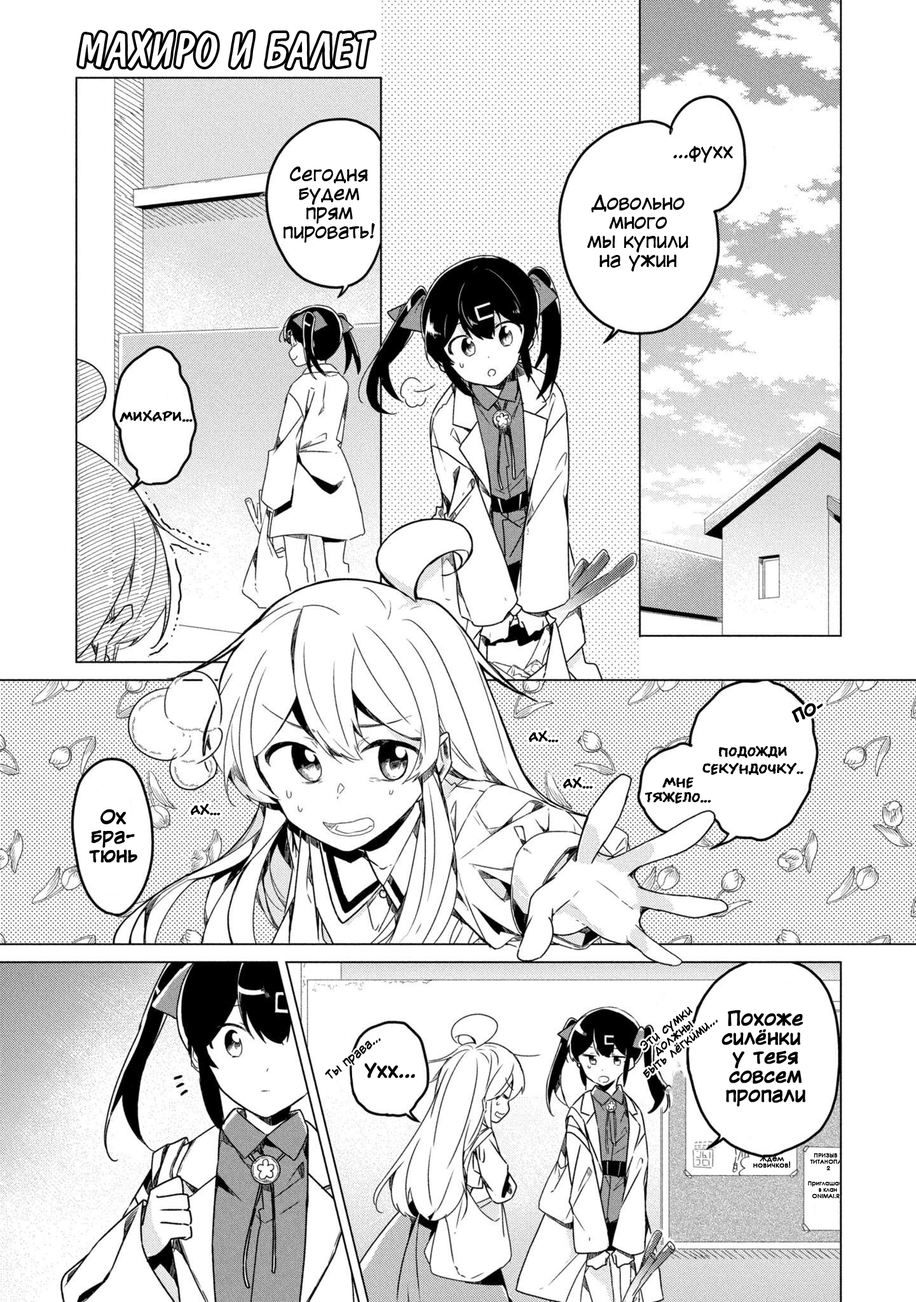
<style>
.page{position:relative;width:916px;height:1302px;background:#ffffff}
.page>*{position:absolute;margin:0}
.t1{font:45.8px "ADomInoItalic";color:#ffffff}
.t2{font:19.1px "KuraiVoice2";color:#000000}
.t3{font:19.1px/19.1px "KuraiVoice2";color:#000000}
.t4{font:15.3px "el_CCEvilSchemes";color:#000000;font-weight:bold}
.t5{font:15.3px "KuraiVoice2-Bold";color:#000000;font-weight:bold}
.t6{font:15.3px "KuraiVoice2";color:#000000;font-weight:bold}
.t7{font:15.3px/17.2px "el_CCEvilSchemes";color:#000000;font-weight:bold}
.t8{font:15.3px/15.3px "el_CCEvilSchemes";color:#000000;font-weight:bold}
.t9{font:19.1px/19.1px "KuraiVoice2";color:#000000;font-weight:bold}
.t10{font:11.4px/11.4px "KuraiVoice2";color:#000000;font-weight:bold}
.t11{font:11.4px "KuraiVoice2";color:#000000;font-weight:bold}
.t12{font:19.1px "KuraiVoice2";color:#000000;font-weight:bold}
.t13{font:7.6px/6.4px "CenturyGothic";color:#000000;font-weight:bold}
</style>
<div class="page">
<p class="t1" style="left:79px;top:31px;width:295px;height:37px">МАХИРО И БАЛЕТ</p>
<p class="t2" style="left:673px;top:146px;width:60px;height:17px">...фухх</p>
<p class="t3" style="left:283px;top:167px;width:92px;height:76px;text-align:center">Сегодня<br>будем<br>прям<br>пировать!</p>
<p class="t3" style="left:587px;top:195px;width:101px;height:76px;text-align:center">Довольно<br>много<br>мы купили<br>на ужин</p>
<p class="t4" style="left:120px;top:410px;width:73px;height:12px">Михари...</p>
<p class="t5" style="left:791px;top:703px;width:32px;height:20px;rotate:-23deg">ПО<span class="t6">-</span></p>
<p class="t4" style="left:529px;top:730px;width:30px;height:12px">аХ...</p>
<p class="t7" style="left:702px;top:746px;width:101px;height:29px;text-align:center">Подожди<br>секундочку..</p>
<p class="t4" style="left:563px;top:777px;width:30px;height:12px">аХ...</p>
<p class="t8" style="left:645px;top:777px;width:66px;height:26px;text-align:center">Мне<br>тяжело...</p>
<p class="t9" style="left:89px;top:809px;width:48px;height:54px;text-align:center">Ох<br>бра-<br>тюнь</p>
<p class="t4" style="left:191px;top:803px;width:30px;height:13px">аХ...</p>
<p class="t10" style="left:640px;top:1006px;width:78px;height:72px;text-align:center;rotate:-39deg">Эти сумки<br>должны<br>быть лёгкими...</p>
<p class="t9" style="left:721px;top:1010px;width:84px;height:97px;text-align:center">Похоже<br>силёнки <br>у тебя<br>совсем<br>пропали</p>
<p class="t11" style="left:325px;top:1038px;width:56px;height:41px;rotate:-39deg">Ты права...</p>
<p class="t12" style="left:364px;top:1062px;width:51px;height:16px">Ухх...</p>
<p class="t13" style="left:753px;top:1155px;width:38px;height:13px;text-align:center">Ждём<br>новичков!</p>
</div>
